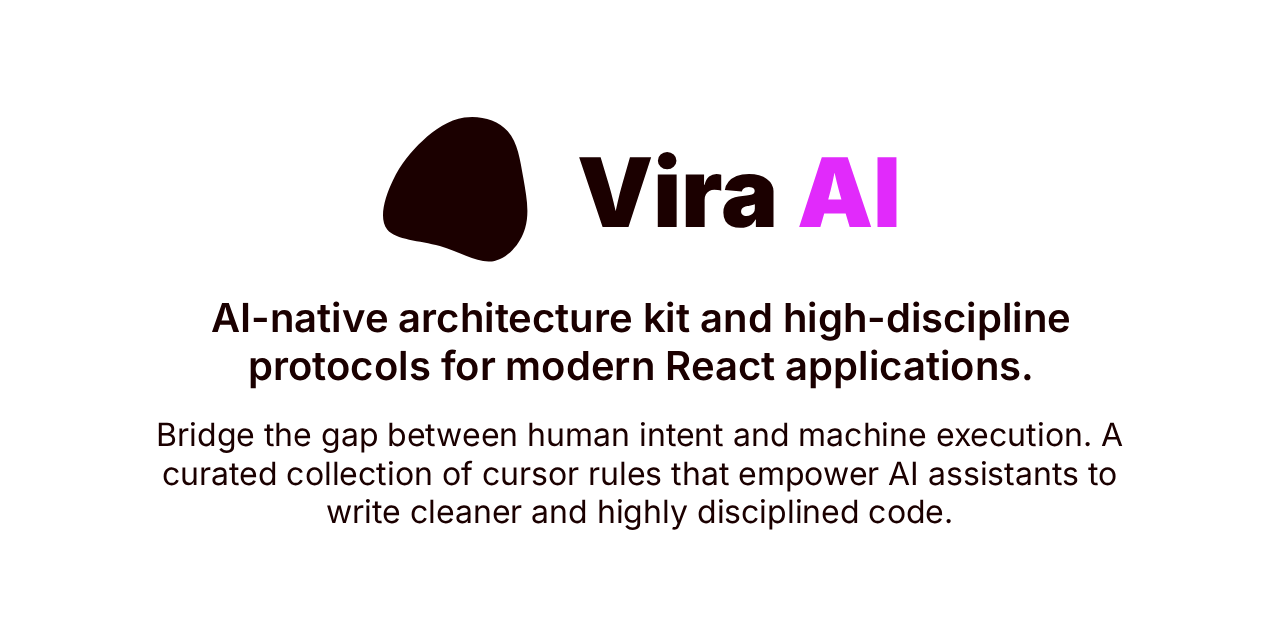
<style>
.page{position:relative;width:1280px;height:640px;background:#ffffff}
.page>*{position:absolute;margin:0}
.t1{font:96px "Inter-Black";color:#1b0000}
.t2{font:96px "Inter-Black";color:#e12afb}
.t3{font:40px "Inter-SemiBold";color:#1b0000}
.t4{font:32px "Inter-Regular";color:#1b0000}
</style>
<div class="page">
<p class="t1" style="left:579px;top:152px;width:318px;height:76px">Vira <span class="t2">AI</span></p>
<p class="t3" style="left:211px;top:301px;width:858px;height:88px;text-align:center">AI-native architecture kit and high-discipline protocols for modern React applications.</p>
<p class="t4" style="left:158px;top:421px;width:965px;height:109px;text-align:center">Bridge the gap between human intent and machine execution. A curated collection of cursor rules that empower AI assistants to write cleaner and highly disciplined code.</p>
</div>
